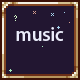
<style>
.page{position:relative;width:80px;height:80px;background:#221631}
.page>*{position:absolute;margin:0}
.t1{font:18px "AdobeHeitiStd-Regular";color:#ecedfd}
</style>
<div class="page">
<p class="t1" style="left:16px;top:27px;width:48px;height:14px">music</p>
</div>
